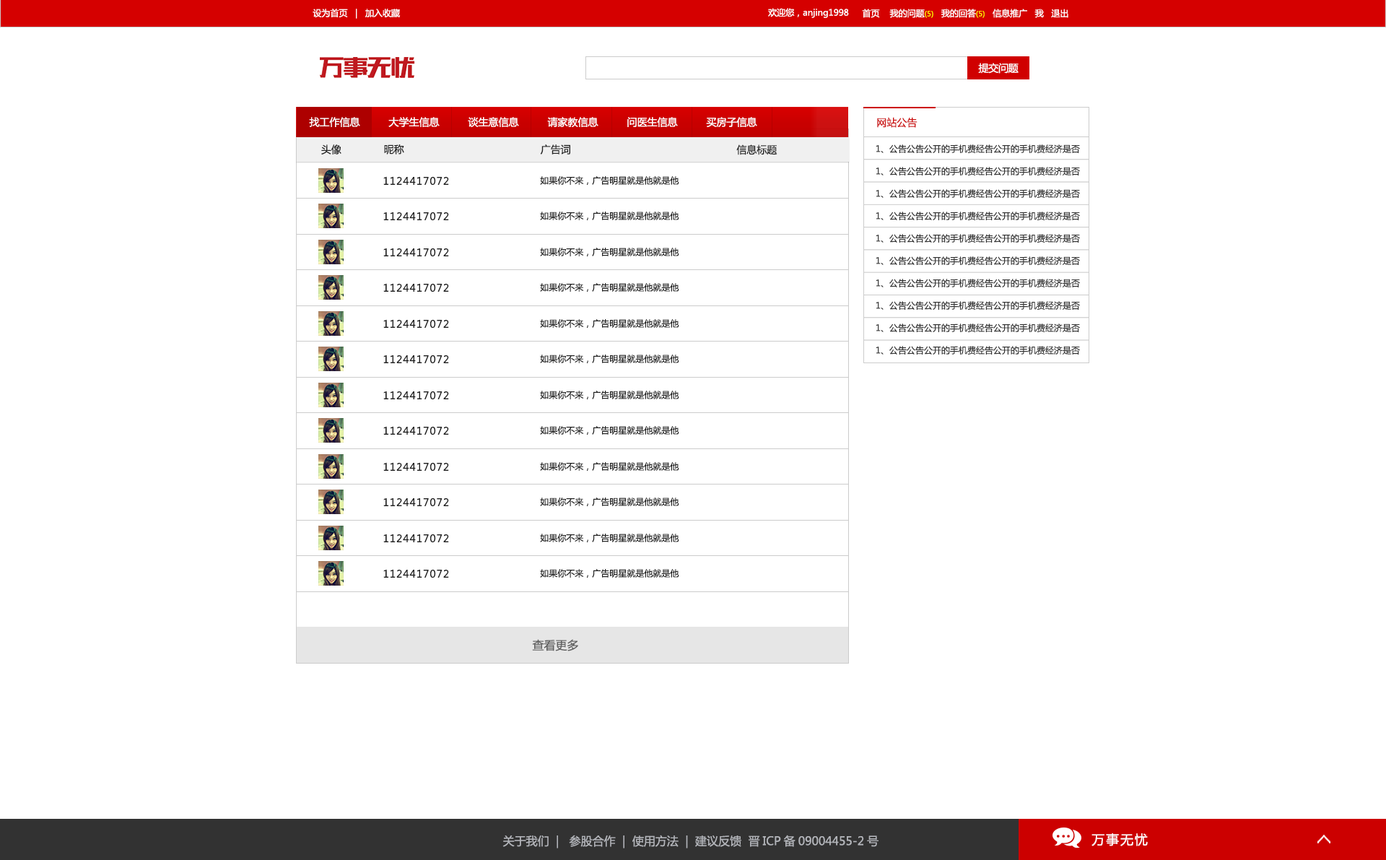
<style>
.page{position:relative;width:1386px;height:860px;background:#ffffff}
.page>*{position:absolute;margin:0}
.t1{font:8.7px "MicrosoftYaHei";color:#ffffff}
.t2{font:7.2px "MicrosoftYaHei";color:#fff600}
.t3{font:10.1px "MicrosoftYaHei";letter-spacing:-0.02em;color:#ffffff}
.t4{font:10.1px "MicrosoftYaHei";color:#ffffff}
.t5{font:10.1px "MicrosoftYaHei";color:#cc1111}
.t6{font:10.1px "MicrosoftYaHei";color:#222222}
.t7{font:8.7px/22.4px "MicrosoftYaHei";color:#333333}
.t8{font:10.1px "MicrosoftYaHei";letter-spacing:0.075em;color:#1f1f1f}
.t9{font:8.7px "MicrosoftYaHei";color:#1f1f1f}
.t10{font:11.6px "MicrosoftYaHei";color:#5e5e5e}
.t11{font:13px "MicrosoftYaHei";letter-spacing:0.1em;color:#ffffff}
.t12{font:11.6px "MicrosoftYaHei";color:#b3b5ba}
</style>
<div class="page">
<p class="t1" style="left:313px;top:9px;width:87px;height:10px">设为首页   |   加入收藏</p>
<p class="t1" style="left:768px;top:8px;width:81px;height:10px">欢迎您，anjing1998</p>
<p class="t1" style="left:862px;top:9px;width:207px;height:9px">首页    我的问题<span class="t2">(5)</span>   我的回答<span class="t2">(5)</span>   信息推广   我   退出</p>
<p class="t3" style="left:978px;top:63px;width:41px;height:11px">提交问题</p>
<p class="t4" style="left:309px;top:117px;width:51px;height:10px">找工作信息</p>
<p class="t4" style="left:389px;top:117px;width:51px;height:10px">大学生信息</p>
<p class="t4" style="left:468px;top:117px;width:51px;height:10px">谈生意信息</p>
<p class="t4" style="left:547px;top:117px;width:52px;height:10px">请家教信息</p>
<p class="t4" style="left:628px;top:117px;width:50px;height:10px">问医生信息</p>
<p class="t4" style="left:706px;top:117px;width:52px;height:10px">买房子信息</p>
<p class="t5" style="left:877px;top:117px;width:41px;height:11px">网站公告</p>
<p class="t6" style="left:321px;top:144px;width:21px;height:11px">头像</p>
<p class="t6" style="left:384px;top:144px;width:20px;height:11px">昵称</p>
<p class="t6" style="left:540px;top:144px;width:30px;height:11px">广告词</p>
<p class="t6" style="left:737px;top:144px;width:41px;height:11px">信息标题</p>
<p class="t7" style="left:876px;top:144px;width:204px;height:211px">1、公告公告公开的手机费经告公开的手机费经济是否<br>1、公告公告公开的手机费经告公开的手机费经济是否<br>1、公告公告公开的手机费经告公开的手机费经济是否<br>1、公告公告公开的手机费经告公开的手机费经济是否<br>1、公告公告公开的手机费经告公开的手机费经济是否<br>1、公告公告公开的手机费经告公开的手机费经济是否<br>1、公告公告公开的手机费经告公开的手机费经济是否<br>1、公告公告公开的手机费经告公开的手机费经济是否<br>1、公告公告公开的手机费经告公开的手机费经济是否<br>1、公告公告公开的手机费经告公开的手机费经济是否</p>
<p class="t8" style="left:383px;top:176px;width:66px;height:9px">1124417072</p>
<p class="t9" style="left:540px;top:176px;width:140px;height:9px">如果你不来，广告明星就是他就是他</p>
<p class="t8" style="left:383px;top:212px;width:66px;height:8px">1124417072</p>
<p class="t9" style="left:540px;top:212px;width:140px;height:8px">如果你不来，广告明星就是他就是他</p>
<p class="t8" style="left:383px;top:248px;width:66px;height:8px">1124417072</p>
<p class="t9" style="left:540px;top:248px;width:140px;height:8px">如果你不来，广告明星就是他就是他</p>
<p class="t8" style="left:383px;top:283px;width:66px;height:9px">1124417072</p>
<p class="t9" style="left:540px;top:283px;width:140px;height:9px">如果你不来，广告明星就是他就是他</p>
<p class="t8" style="left:383px;top:319px;width:66px;height:9px">1124417072</p>
<p class="t9" style="left:540px;top:319px;width:140px;height:9px">如果你不来，广告明星就是他就是他</p>
<p class="t8" style="left:383px;top:355px;width:66px;height:8px">1124417072</p>
<p class="t9" style="left:540px;top:355px;width:140px;height:8px">如果你不来，广告明星就是他就是他</p>
<p class="t8" style="left:383px;top:391px;width:66px;height:8px">1124417072</p>
<p class="t9" style="left:540px;top:391px;width:140px;height:8px">如果你不来，广告明星就是他就是他</p>
<p class="t8" style="left:383px;top:426px;width:66px;height:9px">1124417072</p>
<p class="t9" style="left:540px;top:426px;width:140px;height:9px">如果你不来，广告明星就是他就是他</p>
<p class="t8" style="left:383px;top:462px;width:66px;height:9px">1124417072</p>
<p class="t9" style="left:540px;top:462px;width:140px;height:9px">如果你不来，广告明星就是他就是他</p>
<p class="t8" style="left:383px;top:498px;width:66px;height:8px">1124417072</p>
<p class="t9" style="left:540px;top:498px;width:140px;height:8px">如果你不来，广告明星就是他就是他</p>
<p class="t8" style="left:383px;top:534px;width:66px;height:8px">1124417072</p>
<p class="t9" style="left:540px;top:534px;width:140px;height:8px">如果你不来，广告明星就是他就是他</p>
<p class="t8" style="left:383px;top:569px;width:66px;height:9px">1124417072</p>
<p class="t9" style="left:540px;top:569px;width:140px;height:9px">如果你不来，广告明星就是他就是他</p>
<p class="t10" style="left:532px;top:639px;width:46px;height:12px">查看更多</p>
<p class="t11" style="left:1092px;top:833px;width:56px;height:13px">万事无忧</p>
<p class="t12" style="left:503px;top:835px;width:376px;height:13px">关于我们  |   参股合作  |  使用方法  |  建议反馈  晋ICP备09004455-2号</p>
</div>
